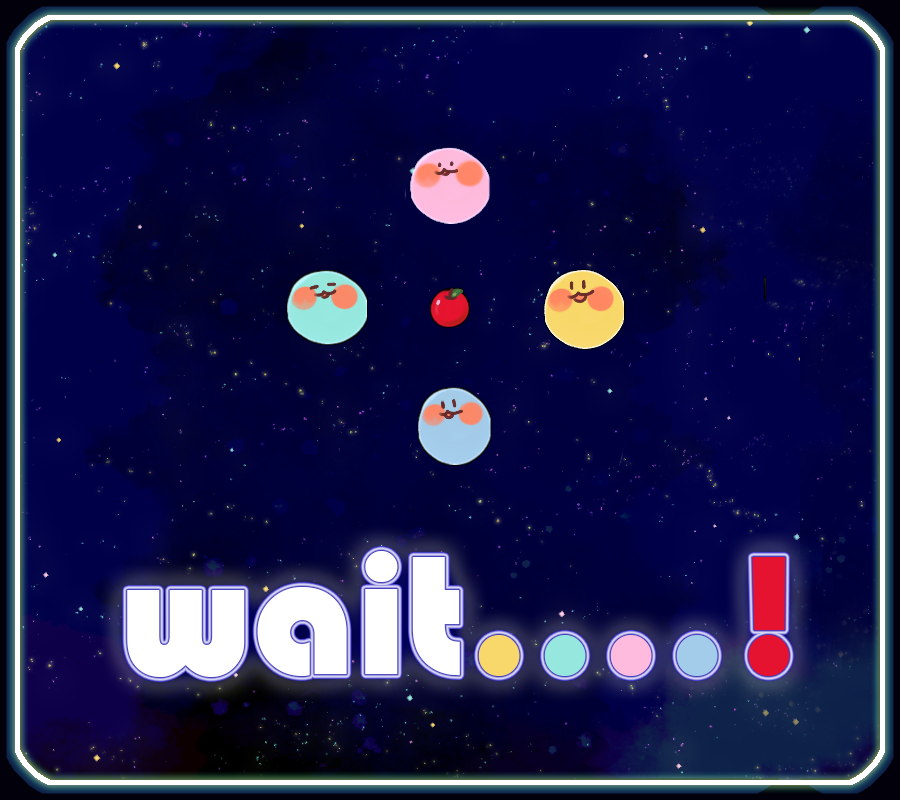
<style>
.page{position:relative;width:900px;height:800px}
.page>*{position:absolute;margin:0}
.t1{font:175px "Bauhaus93";color:#ffffff}
.t2{font:175px "Bauhaus93";color:#f8d86b}
.t3{font:175px "Bauhaus93";color:#96e8de}
.t4{font:175px "Bauhaus93";color:#febbde}
.t5{font:175px "Bauhaus93";color:#a3ccea}
.t6{font:175px "Bauhaus93";color:#e5132f}
</style>
<div class="page">
<p class="t1" style="left:127px;top:551px;width:663px;height:126px">wait<span class="t2">.</span><span class="t3">.</span><span class="t4">.</span><span class="t5">.</span><span class="t6">!</span></p>
</div>
